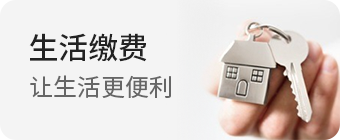
<style>
.page{position:relative;width:340px;height:140px;background:#f4f4f4}
.page>*{position:absolute;margin:0}
.t1{font:30px "SourceHanSansCN-Medium";color:#222222}
.t2{font:24px "SourceHanSansCN-Regular";color:#666666}
</style>
<div class="page">
<p class="t1" style="left:29px;top:33px;width:118px;height:29px">生活缴费</p>
<p class="t2" style="left:30px;top:75px;width:141px;height:23px">让生活更便利</p>
</div>
